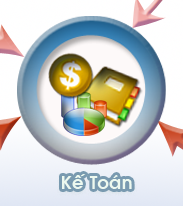
<style>
.page{position:relative;width:183px;height:206px}
.page>*{position:absolute;margin:0}
.t1{font:18px "VNI-Avo-Bold";color:#edf9ef}
</style>
<div class="page">
<p class="t1" style="left:62px;top:174px;width:70px;height:15px">Keá Toaùn</p>
</div>
